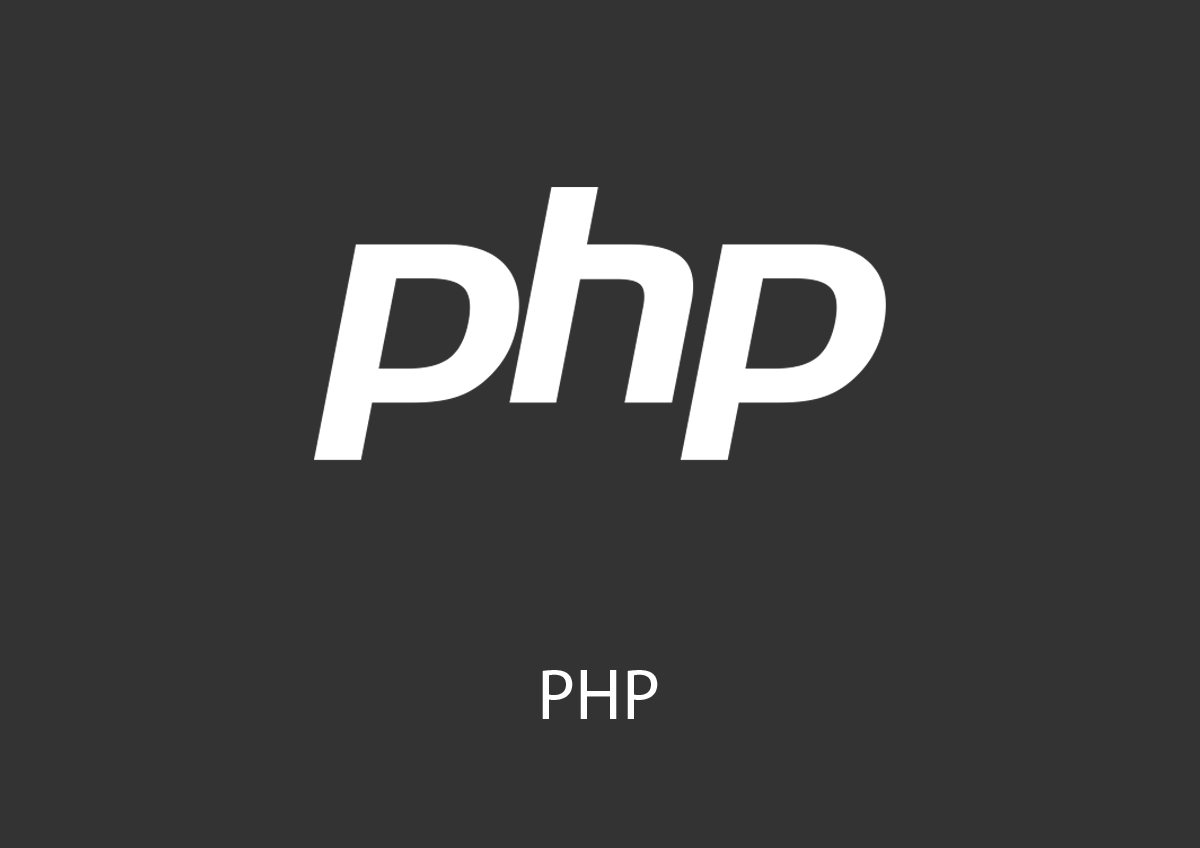
<style>
.page{position:relative;width:1200px;height:848px;background:#333333}
.page>*{position:absolute;margin:0}
.t1{font:72px "MyriadPro-Regular";color:#fefefe}
</style>
<div class="page">
<p class="t1" style="left:542px;top:670px;width:116px;height:49px">PHP</p>
</div>
